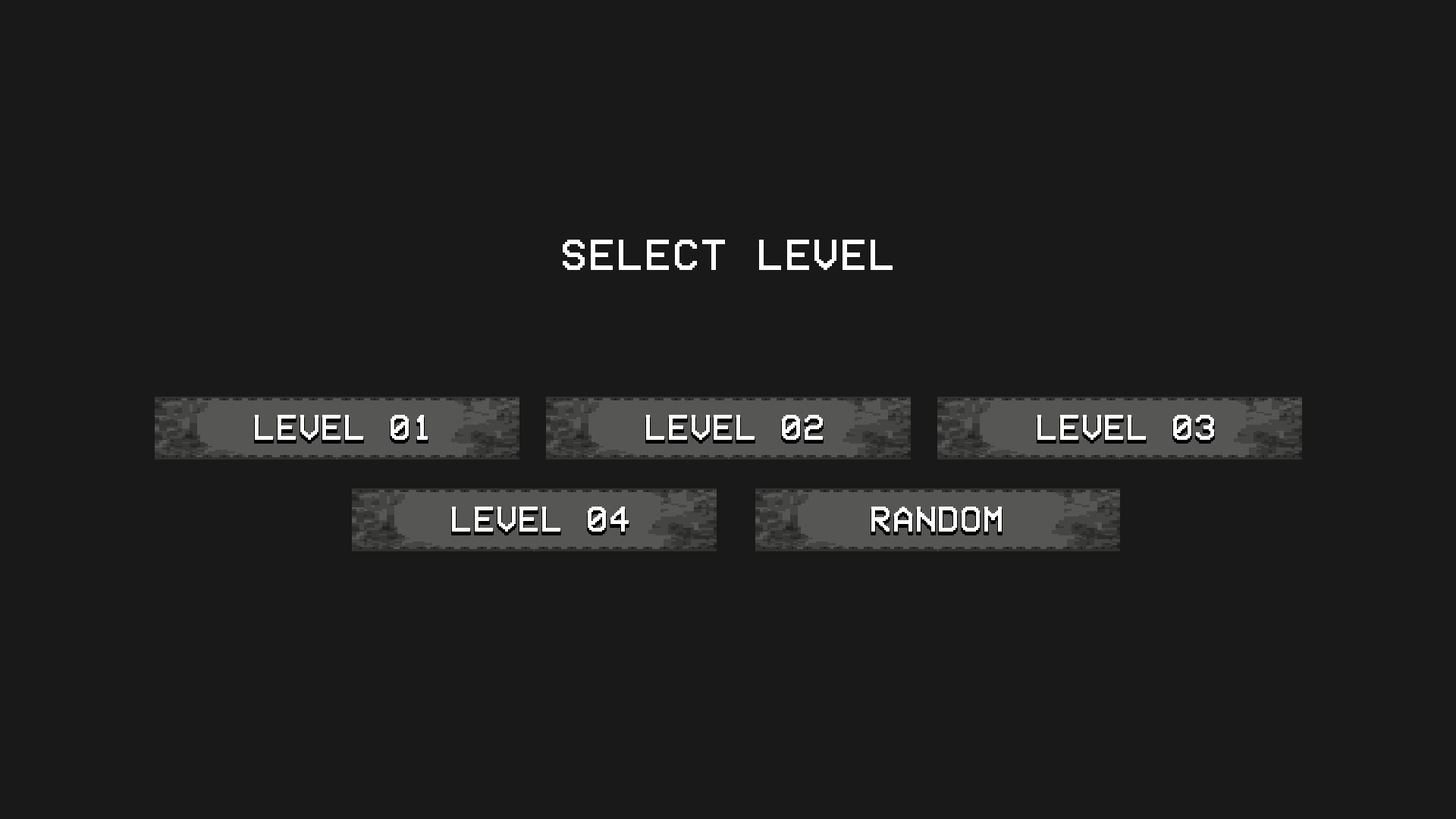
<style>
.page{position:relative;width:1456px;height:819px;background:#191919}
.page>*{position:absolute;margin:0}
.t1{font:44.7px "VCROSDMono";letter-spacing:0.04em;color:#ffffff;text-transform:uppercase}
.t2{font:36px "VCROSDMono";letter-spacing:0.04em;color:#ffffff;text-transform:uppercase}
</style>
<div class="page">
<p class="t1" style="left:563px;top:240px;width:330px;height:30px">Select level</p>
<p class="t2" style="left:255px;top:415px;width:173px;height:25px">Level 01</p>
<p class="t2" style="left:646px;top:415px;width:177px;height:25px">Level 02</p>
<p class="t2" style="left:1037px;top:415px;width:177px;height:25px">Level 03</p>
<p class="t2" style="left:452px;top:507px;width:177px;height:25px">Level 04</p>
<p class="t2" style="left:871px;top:507px;width:131px;height:25px">Random</p>
</div>
